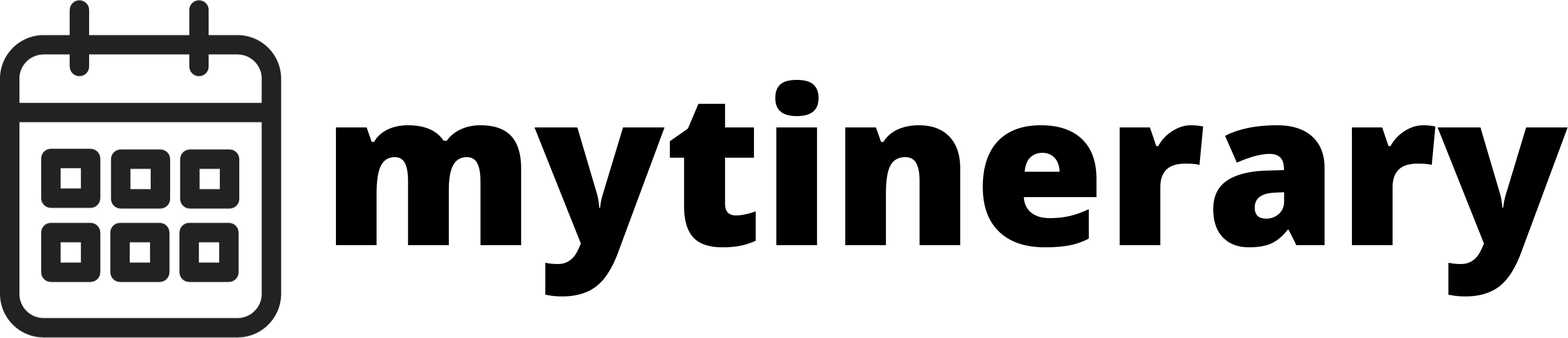
<style>
.page{position:relative;width:1568px;height:338px;background:#ffffff}
.page>*{position:absolute;margin:0}
.t1{font:212.8px "OpenSans-Extrabold";color:#000000}
</style>
<div class="page">
<p class="t1" style="left:335px;top:80px;width:1233px;height:217px">mytinerary</p>
</div>
